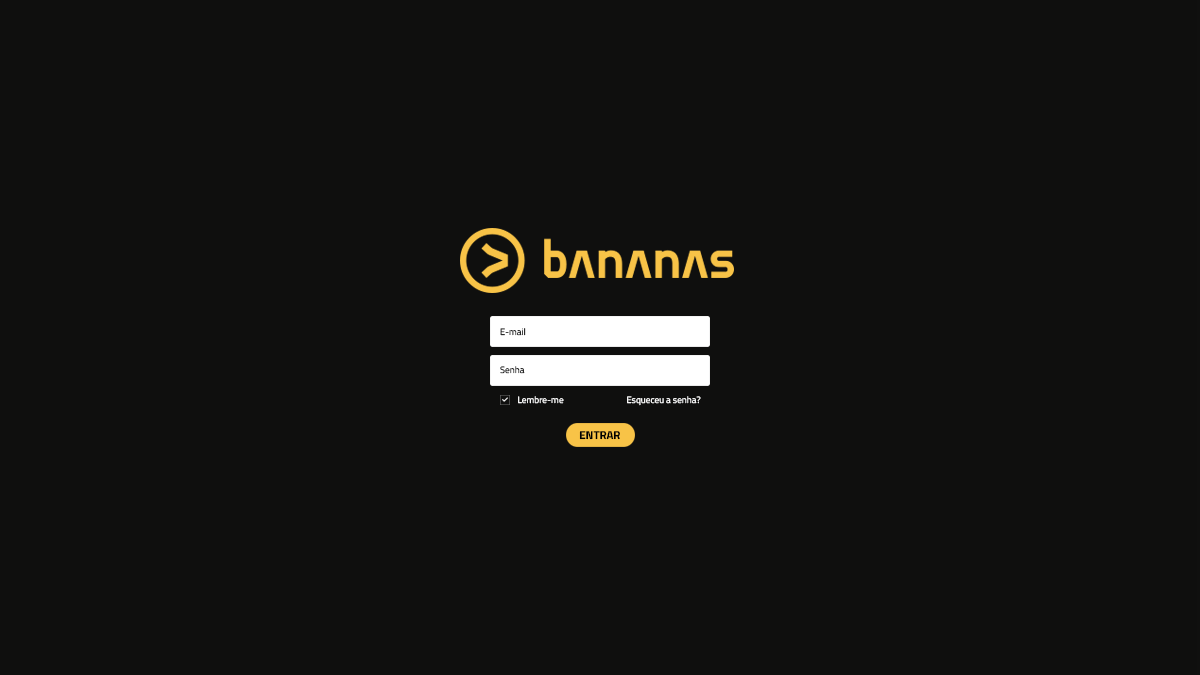
<style>
.page{position:relative;width:1200px;height:675px;background:#0f0f0e}
.page>*{position:absolute;margin:0}
.t1{font:9.3px "TitilliumWeb-Regular"}
.t2{font:9.3px "TitilliumWeb-Regular";color:#ffffff}
.t3{font:11.4px "TitilliumWeb-Bold";color:#000000}
</style>
<div class="page">
<p class="t1" style="left:500px;top:328px;width:26px;height:8px">E-mail</p>
<p class="t1" style="left:500px;top:366px;width:25px;height:8px">Senha</p>
<p class="t2" style="left:518px;top:396px;width:46px;height:8px">Lembre-me</p>
<p class="t2" style="left:627px;top:396px;width:74px;height:10px">Esqueceu a senha?</p>
<p class="t3" style="left:579px;top:431px;width:41px;height:9px">ENTRAR</p>
</div>
